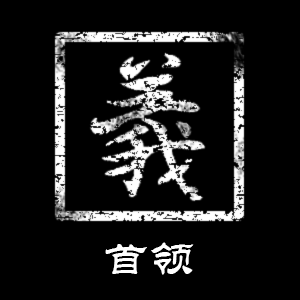
<style>
.page{position:relative;width:300px;height:300px;background:#000000}
.page>*{position:absolute;margin:0}
.t1{font:45.8px "STLiti";letter-spacing:0.01em;color:#ffffff}
</style>
<div class="page">
<p class="t1" style="left:105px;top:242px;width:89px;height:33px">首领</p>
</div>
